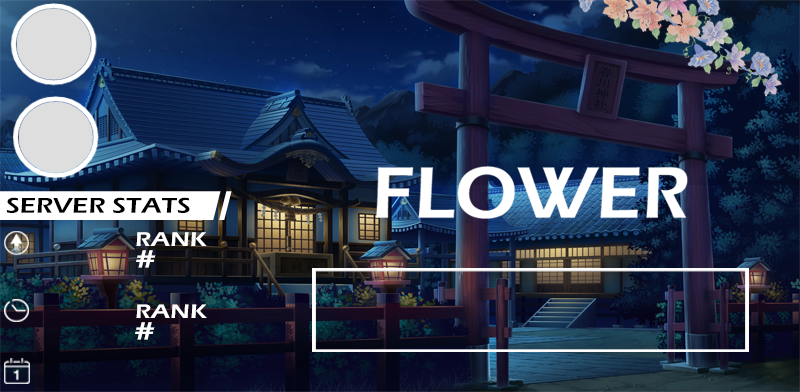
<style>
.page{position:relative;width:800px;height:392px}
.page>*{position:absolute;margin:0}
.t1{font:22.2px "ErasITC-Demi";color:#000000;scale:1.21 1}
.t2{font:20.5px "ErasITC-Demi";color:#ffffff;scale:1.23 1}
.t3{font:25.8px "ErasITC-Demi";color:#ffffff;scale:1.33 1}
.t4{font:20.3px "ErasITC-Demi";color:#ffffff;scale:1.25 1}
</style>
<div class="page">
<p class="t1" style="left:6px;top:197px;width:184px;height:16px">SERVER STATS</p>
<p class="t2" style="left:136px;top:232px;width:71px;height:14px">RANK</p>
<p class="t3" style="left:136px;top:250px;width:20px;height:18px">#</p>
<p class="t4" style="left:136px;top:304px;width:71px;height:14px">RANK</p>
<p class="t3" style="left:135px;top:322px;width:20px;height:18px">#</p>
</div>
